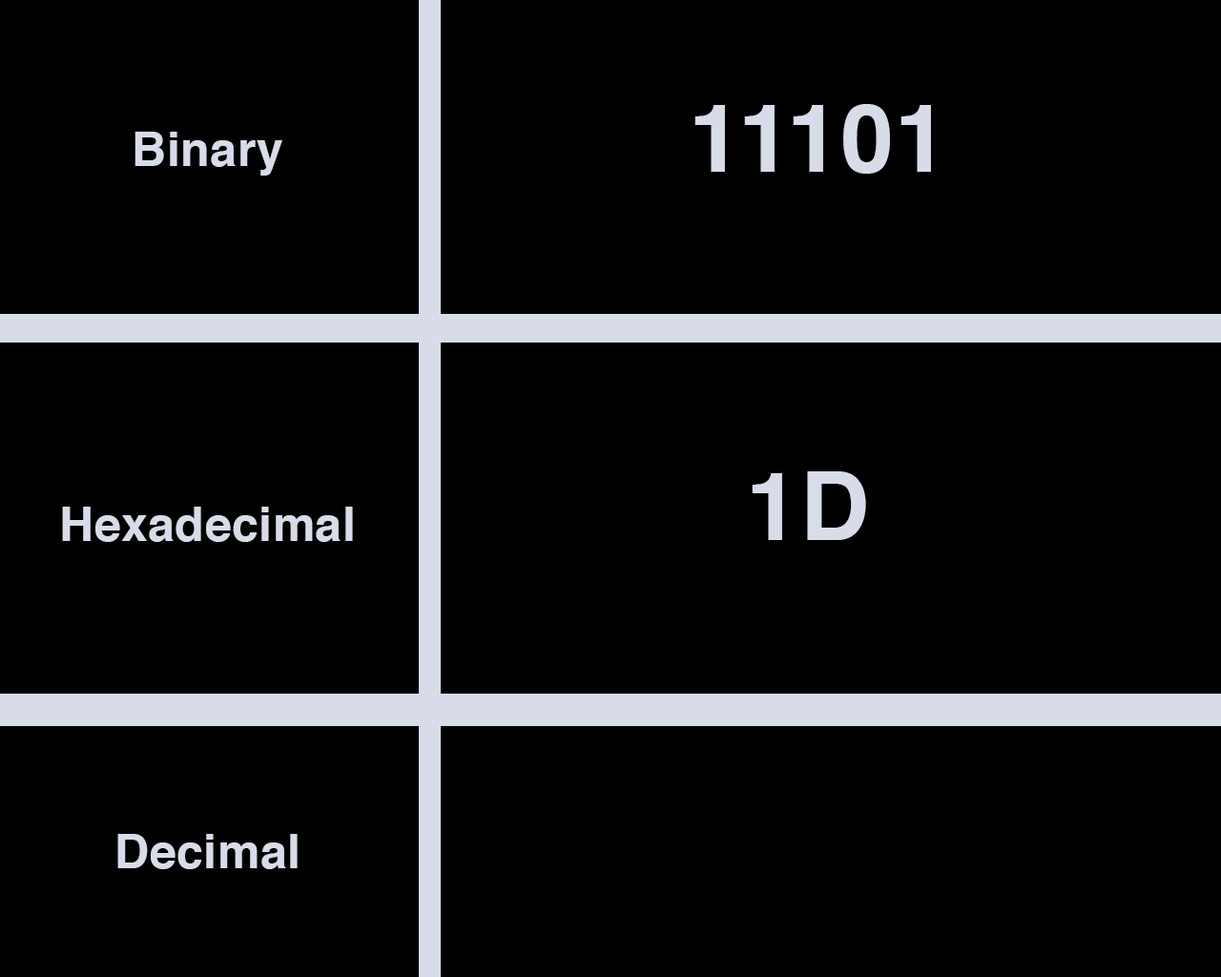
<style>
.page{position:relative;width:1221px;height:977px;background:#000000}
.page>*{position:absolute;margin:0}
.t1{font:95.4px "Helvetica-Bold";letter-spacing:0.01em;color:#d8dce8}
.t2{font:47.7px "Helvetica-Bold";letter-spacing:0.01em;color:#d8dce8}
</style>
<div class="page">
<p class="t1" style="left:694px;top:104px;width:237px;height:70px">11101</p>
<p class="t2" style="left:134px;top:132px;width:148px;height:44px">Binary</p>
<p class="t1" style="left:752px;top:471px;width:114px;height:69px">1D</p>
<p class="t2" style="left:62px;top:506px;width:291px;height:36px">Hexadecimal</p>
<p class="t2" style="left:117px;top:834px;width:181px;height:35px">Decimal</p>
</div>
